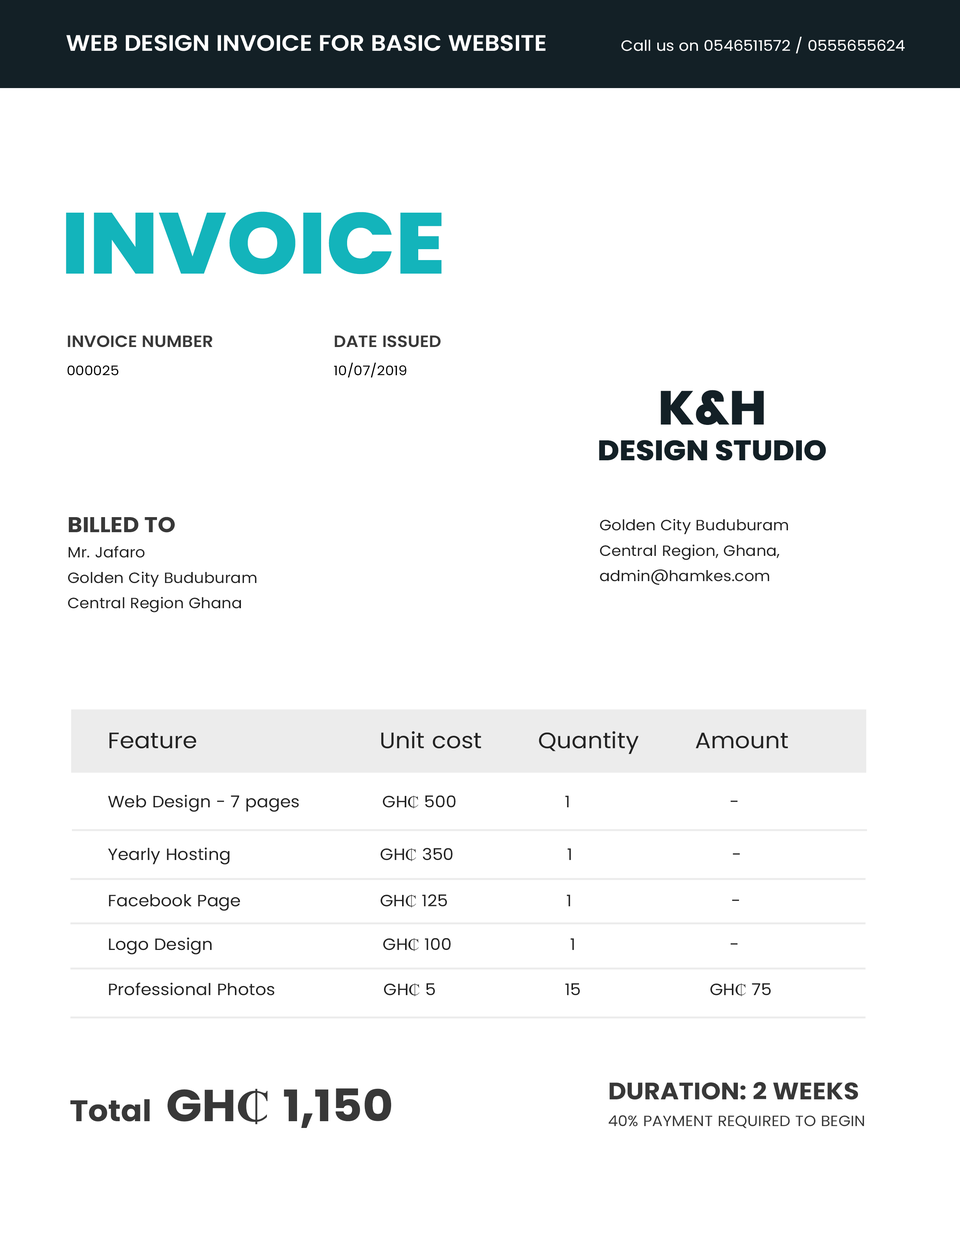
<style>
.page{position:relative;width:960px;height:1242px;background:#ffffff}
.page>*{position:absolute;margin:0}
.t1{font:22.4px "Poppins-SemiBold";color:#ffffff;scale:1.05 1}
.t2{font:14.9px "Poppins-Regular";color:#ffffff;scale:1.05 1}
.t3{font:86.4px "Poppins-ExtraBold";color:#13b4bb;scale:1.05 1}
.t4{font:13.4px/28.2px "Poppins-Regular";color:#000000;scale:1.05 1}
.t5{font:16.4px "Poppins-SemiBold";color:#383838;scale:1.05 1}
.t6{font:28.3px "Poppins-ExtraBold";color:#132026;scale:1.05 1}
.t7{font:47.7px "Poppins-ExtraBold";color:#132026;scale:1.05 1}
.t8{font:14.9px/25.4px "Poppins-Regular";color:#232323;scale:1.05 1}
.t9{font:21.4px/30.1px "Poppins-Bold";color:#383838;scale:1.05 1}
.t10{font:22.4px "Poppins-Regular";color:#232323;scale:1.05 1}
.t11{font:16.4px "Poppins-Regular";color:#232323;scale:1.05 1}
.t12{font:16.4px "TimesNewRomanPSMT";color:#232323;scale:1.05 1}
.t13{font:14.9px/26.7px "Poppins-Regular";color:#383838;text-transform:uppercase;scale:1.05 1}
.t14{font:23.8px/26.7px "Poppins-Bold";color:#383838;text-transform:uppercase;scale:1.05 1}
.t15{font:29.8px "Poppins-Bold";color:#383838;scale:1.05 1}
.t16{font:44.7px "Poppins-Bold";color:#383838;scale:1.05 1}
.t17{font:44.7px "TimesNewRomanPS-BoldMT";color:#383838;scale:1.05 1}
</style>
<div class="page">
<p class="t1" style="left:66px;top:35px;width:839px;height:18px">WEB DESIGN INVOICE FOR BASIC WEBSITE                   <span class="t2">Call us on 0546511572 / 0555655624</span></p>
<p class="t3" style="left:66px;top:212px;width:376px;height:62px">INVOICE</p>
<p class="t4" style="left:67px;top:335px;width:374px;height:43px"><span class="t5">INVOICE NUMBER                          DATE ISSUED<br></span>000025                                                   10/07/2019</p>
<p class="t6" style="left:599px;top:390px;width:227px;height:71px;text-align:center"><span class="t7">K&amp;H<br></span>DESIGN STUDIO</p>
<p class="t8" style="left:68px;top:517px;width:188px;height:95px"><span class="t9">BILLED TO <br></span>Mr. Jafaro<br>Golden City Buduburam<br>Central Region Ghana</p>
<p class="t8" style="left:600px;top:519px;width:188px;height:66px">Golden City Buduburam <br>Central Region, Ghana,<br>admin@hamkes.com</p>
<p class="t10" style="left:109px;top:731px;width:679px;height:23px">Feature                          Unit cost        Quantity        Amount</p>
<p class="t11" style="left:108px;top:795px;width:629px;height:17px">Web Design - 7 pages                GH<span class="t12">₵</span> 500                     1                               -</p>
<p class="t11" style="left:108px;top:847px;width:632px;height:18px">Yearly Hosting                             GH<span class="t12">₵</span> 350                      1                               -</p>
<p class="t11" style="left:109px;top:894px;width:630px;height:17px">Facebook Page                           GH<span class="t12">₵</span> 125                       1                               -</p>
<p class="t11" style="left:109px;top:937px;width:628px;height:18px">Logo Design                                 GH<span class="t12">₵</span> 100                       1                              -</p>
<p class="t11" style="left:109px;top:982px;width:662px;height:15px">Professional Photos                     GH<span class="t12">₵</span> 5                         15                         GH<span class="t12">₵</span> 75</p>
<p class="t13" style="left:608px;top:1082px;width:256px;height:47px"><span class="t14">duration: 2 weeks<br></span>40% payment required to begin</p>
<p class="t15" style="left:70px;top:1089px;width:321px;height:39px">Total  <span class="t16">GH</span><span class="t17">₵ </span><span class="t16">1,150</span></p>
</div>
